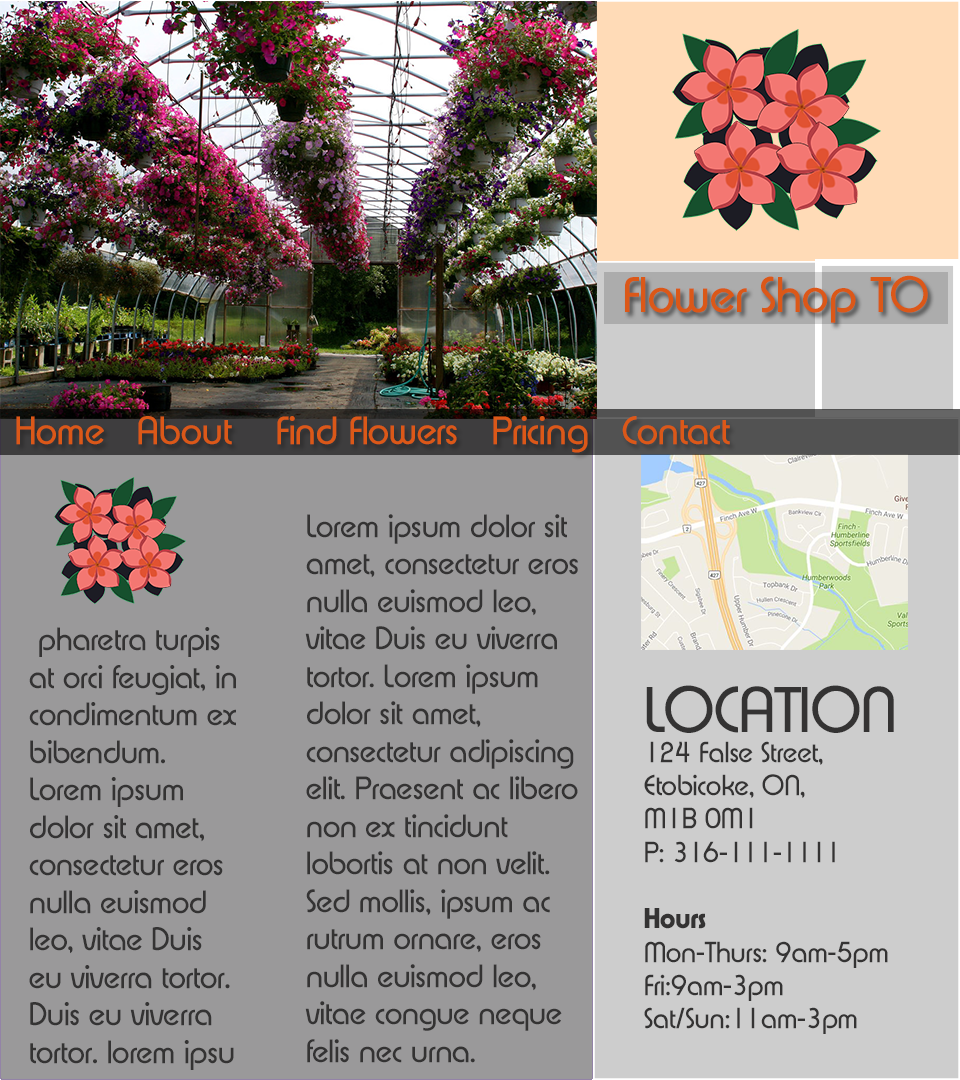
<style>
.page{position:relative;width:960px;height:1080px;background:#9a999a}
.page>*{position:absolute;margin:0}
.t1{font:48.6px "XpressSF";color:#db5818}
.t2{font:38.2px "XpressSF";color:#db5818}
.t3{font:31.2px "XpressSF";color:#343333}
.t4{font:62.5px "XpressSF";color:#343333}
.t5{font:27.8px "XpressSF";color:#343333}
.t6{font:27.8px "XpressSFBold";color:#343333}
</style>
<div class="page">
<p class="t1" style="left:625px;top:275px;width:303px;height:48px">Flower Shop TO</p>
<p class="t2" style="left:16px;top:416px;width:714px;height:37px">Home   About    Find Flowers   Pricing   Contact</p>
<p class="t3" style="left:305px;top:514px;width:273px;height:549px">Lorem ipsum dolor sit amet, consectetur eros nulla euismod leo, vitae Duis eu viverra tortor. Lorem ipsum dolor sit amet, consectetur adipiscing elit. Praesent ac libero non ex tincidunt lobortis at non velit. Sed mollis, ipsum ac rutrum ornare, eros nulla euismod leo, vitae congue neque felis nec urna.</p>
<p class="t3" style="left:29px;top:627px;width:207px;height:443px">pharetra turpis at orci feugiat, in condimentum ex bibendum.<br>Lorem ipsum dolor sit amet, consectetur eros nulla euismod leo, vitae Duis eu viverra tortor. Duis eu viverra tortor. lorem ipsu</p>
<p class="t4" style="left:646px;top:685px;width:248px;height:48px">LOCATION</p>
<p class="t5" style="left:644px;top:741px;width:244px;height:293px">124 False Street,<br>Etobicoke, ON, <br>M1B 0M1 <br>P: 316-111-1111<br><br><span class="t6">Hours<br></span>Mon-Thurs: 9am-5pm<br>Fri:9am-3pm<br>Sat/Sun:11am-3pm</p>
</div>
